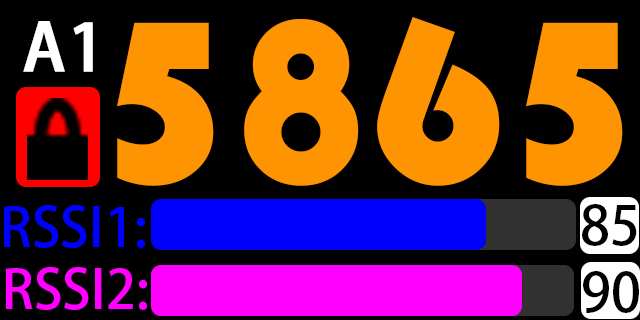
<style>
.page{position:relative;width:640px;height:320px;background:#000000}
.page>*{position:absolute;margin:0}
.t1{font:240px "STHupo";color:#ff9402}
.t2{font:64.8px "AdobeHeitiStd-Regular";color:#ffffff;font-weight:bold}
.t3{font:53.3px "AdobeHeitiStd-Regular";color:#0000ff}
.t4{font:53.3px "AdobeHeitiStd-Regular";color:#000000}
.t5{font:53.3px "AdobeHeitiStd-Regular";color:#ff00ff}
</style>
<div class="page">
<p class="t1" style="left:117px;top:17px;width:506px;height:169px">5865</p>
<p class="t2" style="left:23px;top:21px;width:70px;height:51px">A1</p>
<p class="t3" style="left:4px;top:205px;width:141px;height:43px">RSSI1:</p>
<p class="t4" style="left:582px;top:204px;width:55px;height:42px">85</p>
<p class="t5" style="left:6px;top:267px;width:141px;height:43px">RSSI2:</p>
<p class="t4" style="left:583px;top:271px;width:56px;height:42px">90</p>
</div>
